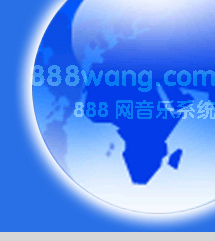
<style>
.page{position:relative;width:215px;height:241px}
.page>*{position:absolute;margin:0}
.t1{font:28.4px "FZY4JW--GB1-0"}
.t2{font:20px "FZY4JW--GB1-0"}
</style>
<div class="page">
<p class="t1" style="left:30px;top:65px;width:186px;height:27px">888wang.com</p>
<p class="t2" style="left:74px;top:100px;width:142px;height:19px">888网音乐系统</p>
</div>
